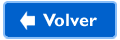
<style>
.page{position:relative;width:120px;height:40px;background:#0061cc}
.page>*{position:absolute;margin:0}
.t1{font:18px "GillSansMT-Bold";color:#ffffff}
</style>
<div class="page">
<p class="t1" style="left:43px;top:13px;width:54px;height:14px">Volver</p>
</div>
